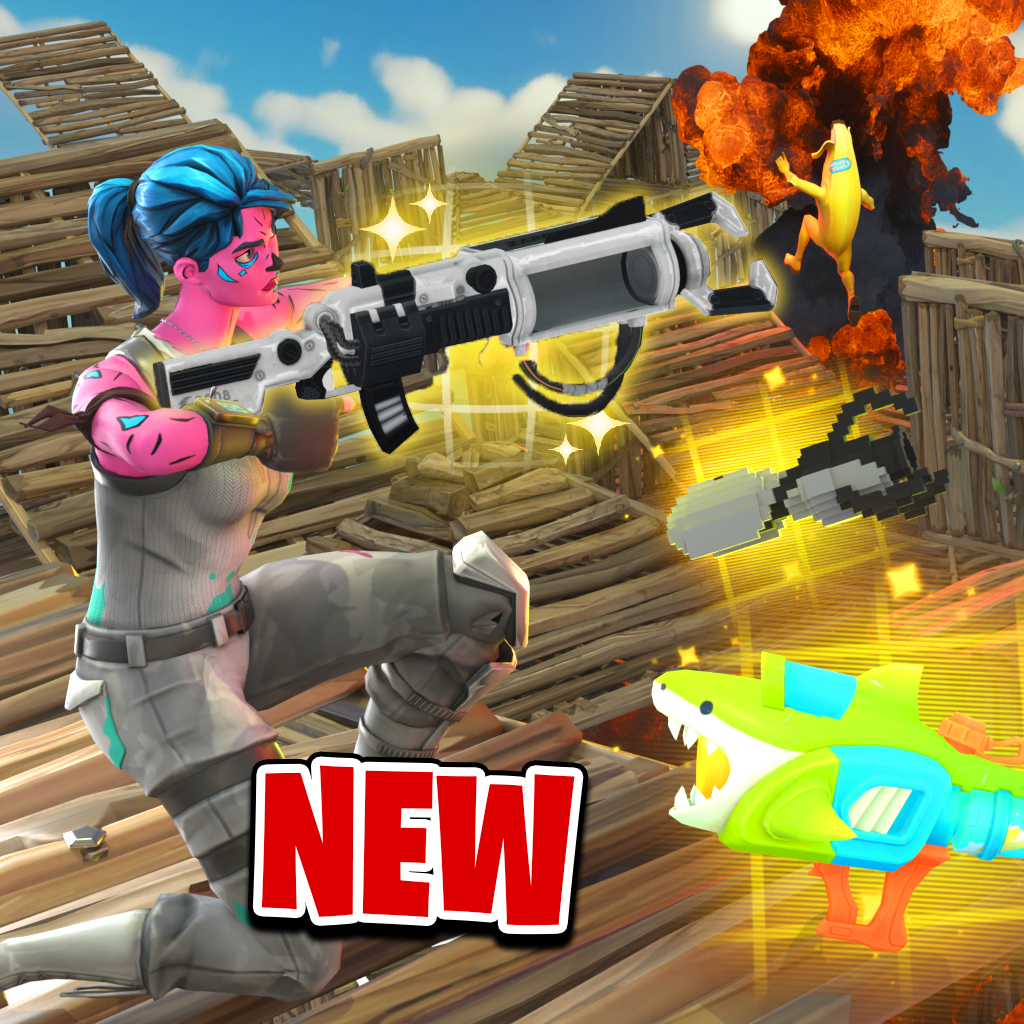
<style>
.page{position:relative;width:1024px;height:1024px}
.page>*{position:absolute;margin:0}
.t1{font:206.5px "BurbankBigCondensed-Black";color:#dd0000}
</style>
<div class="page">
<p class="t1" style="left:261px;top:765px;width:314px;height:161px;rotate:2deg">NEW</p>
</div>
